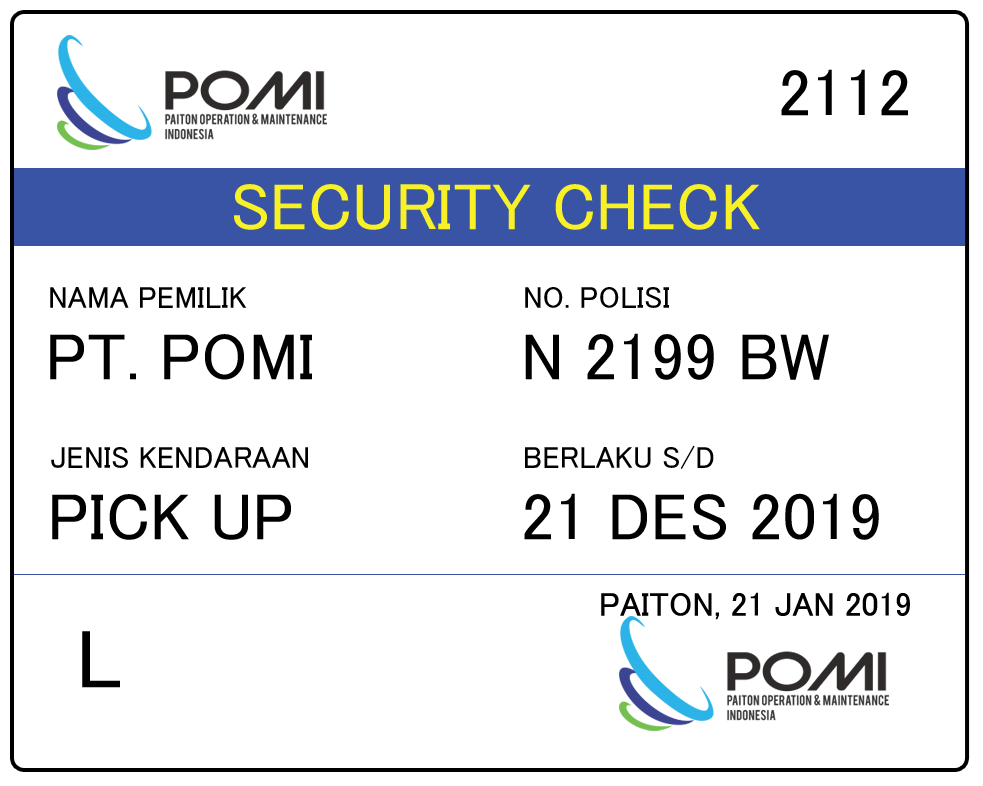
<style>
.page{position:relative;width:983px;height:786px;background:#ffffff}
.page>*{position:absolute;margin:0}
.t1{font:66.7px "MS-PGothic";color:#000000}
.t2{font:66.7px "MS-PGothic";color:#f8f128}
.t3{font:30.6px "MS-PGothic";color:#000000}
.t4{font:33.3px "MS-PGothic";color:#000000}
.t5{font:83.3px "MS-PGothic";color:#000000}
</style>
<div class="page">
<p class="t1" style="left:781px;top:69px;width:127px;height:47px">2112</p>
<p class="t2" style="left:234px;top:184px;width:526px;height:46px">SECURITY CHECK</p>
<p class="t3" style="left:50px;top:287px;width:197px;height:21px">NAMA PEMILIK</p>
<p class="t3" style="left:525px;top:287px;width:144px;height:21px">NO. POLISI</p>
<p class="t1" style="left:50px;top:334px;width:262px;height:46px">PT. POMI</p>
<p class="t1" style="left:525px;top:333px;width:304px;height:47px">N 2199 BW</p>
<p class="t3" style="left:51px;top:447px;width:257px;height:21px">JENIS KENDARAAN</p>
<p class="t3" style="left:525px;top:445px;width:189px;height:24px">BERLAKU S/D</p>
<p class="t1" style="left:52px;top:494px;width:239px;height:46px">PICK UP</p>
<p class="t1" style="left:524px;top:493px;width:355px;height:47px">21 DES 2019</p>
<p class="t4" style="left:601px;top:592px;width:309px;height:28px">PAITON, 21 JAN 2019</p>
<p class="t5" style="left:82px;top:631px;width:38px;height:57px">L</p>
</div>
